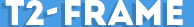
<style>
.page{position:relative;width:194px;height:27px;background:#ffffff}
.page>*{position:absolute;margin:0}
.t1{font:35.5px "Intro";color:#ffffff}
.t2{font:35.5px "GoudyStout";color:#ffffff}
</style>
<div class="page">
<p class="t1" style="left:5px;top:0px;width:178px;height:25px">t2<span class="t2">-</span>Frame</p>
</div>
